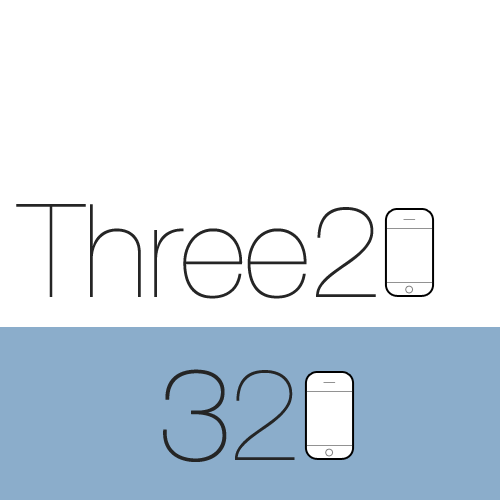
<style>
.page{position:relative;width:500px;height:500px;background:#ffffff}
.page>*{position:absolute;margin:0}
.t1{font:130px "HelveticaNeue-UltraLight";letter-spacing:-0.005em;color:#252525}
.t2{font:130px "HelveticaNeue-UltraLight";letter-spacing:-0.05em;color:#252525;font-weight:bold}
.t3{font:130px "HelveticaNeue-UltraLight";letter-spacing:-0.05em;color:#252525}
</style>
<div class="page">
<p class="t1" style="left:16px;top:204px;width:360px;height:95px">Three2</p>
<p class="t2" style="left:163px;top:369px;width:132px;height:93px">3<span class="t3">2</span></p>
</div>
